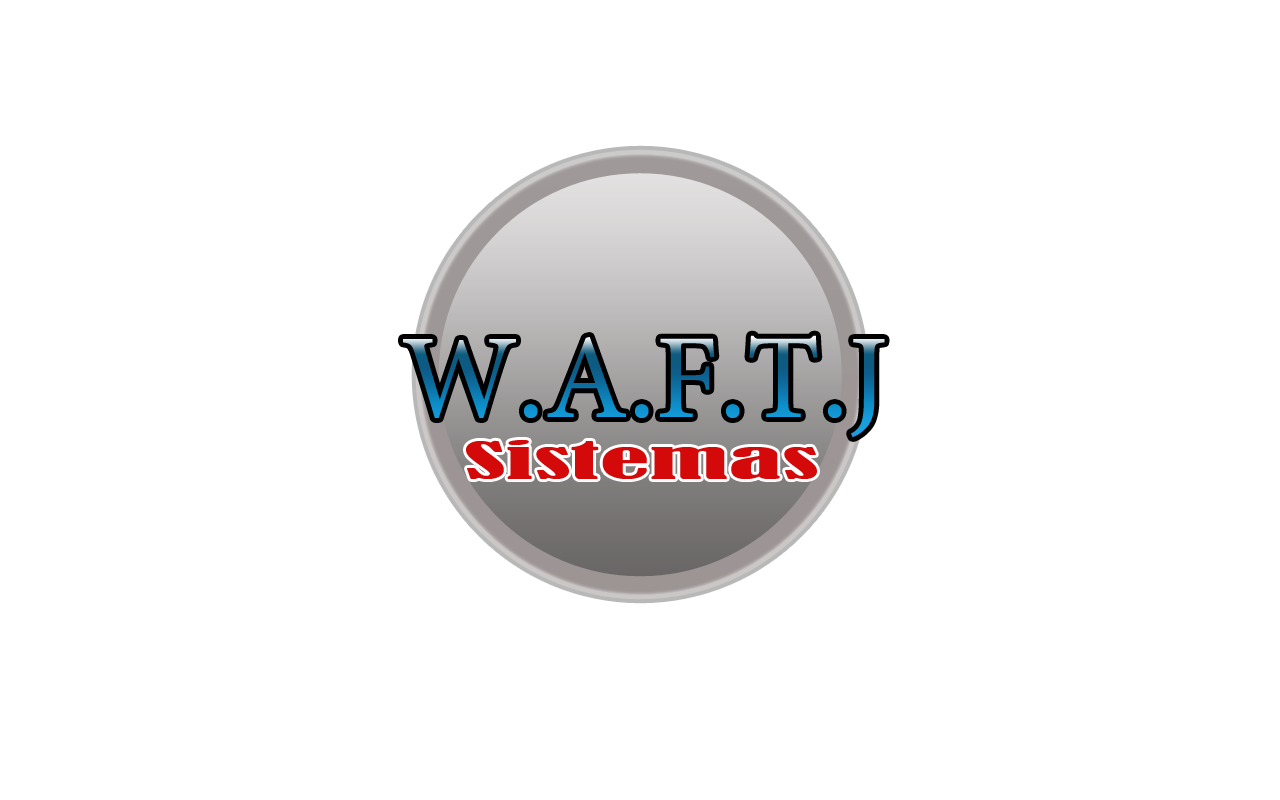
<style>
.page{position:relative;width:1280px;height:800px;background:#ffffff}
.page>*{position:absolute;margin:0}
.t1{font:120.3px "MinionPro-Regular"}
.t2{font:48px "BernardMT-Condensed";color:#d40909;scale:2.29 1}
</style>
<div class="page">
<p class="t1" style="left:403px;top:335px;width:482px;height:102px">W.A.F.T.J</p>
<p class="t2" style="left:466px;top:440px;width:351px;height:39px">Sistemas</p>
</div>
